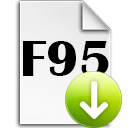
<style>
.page{position:relative;width:128px;height:128px;background:#ffffff}
.page>*{position:absolute;margin:0}
.t1{font:51.7px "BritannicBold";color:#000000;scale:1.03 1}
</style>
<div class="page">
<p class="t1" style="left:23px;top:41px;width:86px;height:35px">F95</p>
</div>
